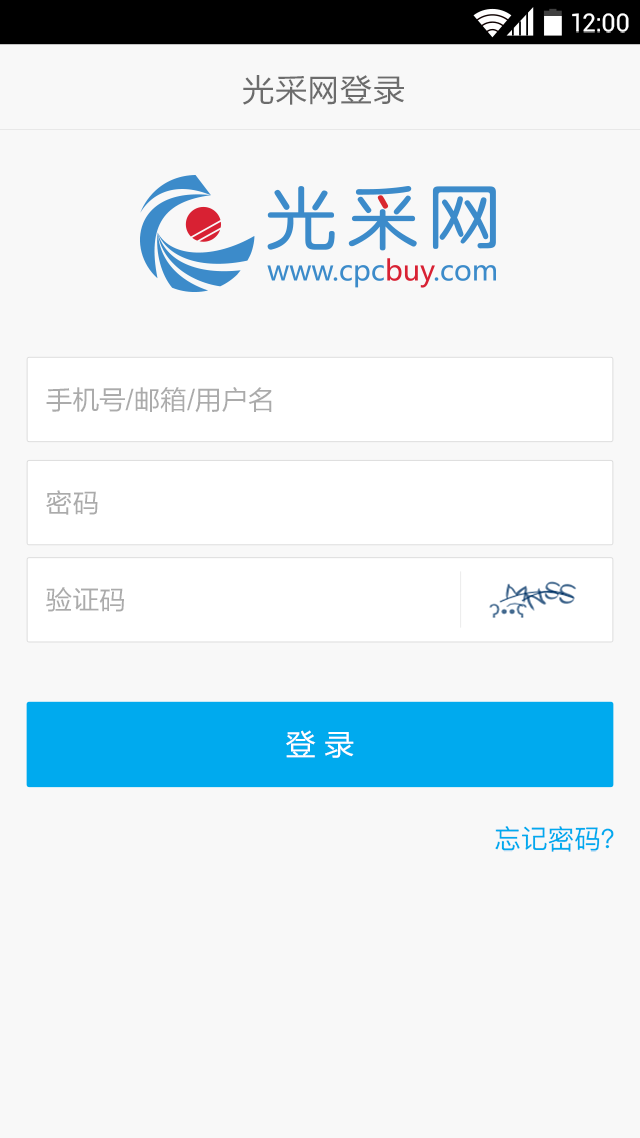
<style>
.page{position:relative;width:640px;height:1138px;background:#f8f8f8}
.page>*{position:absolute;margin:0}
.t1{font:24.9px "Roboto-Regular";color:#ffffff}
.t2{font:32px "FZLTHJW--GB1-0";letter-spacing:0.02em;color:#6c6c6c}
.t3{font:26.7px "FZLTHJW--GB1-0";color:#ababab}
.t4{font:30.2px "FZLTHJW--GB1-0";color:#ffffff}
.t5{font:26.7px "PingFang-SC-Medium";color:#00aaee}
</style>
<div class="page">
<p class="t1" style="left:572px;top:13px;width:57px;height:20px">12:00</p>
<p class="t2" style="left:243px;top:75px;width:161px;height:30px">光采网登录</p>
<p class="t3" style="left:46px;top:387px;width:226px;height:26px">手机号/邮箱/用户名</p>
<p class="t3" style="left:46px;top:490px;width:52px;height:25px">密码</p>
<p class="t3" style="left:46px;top:587px;width:78px;height:25px">验证码</p>
<p class="t4" style="left:286px;top:730px;width:68px;height:28px">登 录</p>
<p class="t5" style="left:495px;top:826px;width:119px;height:26px">忘记密码？</p>
</div>
